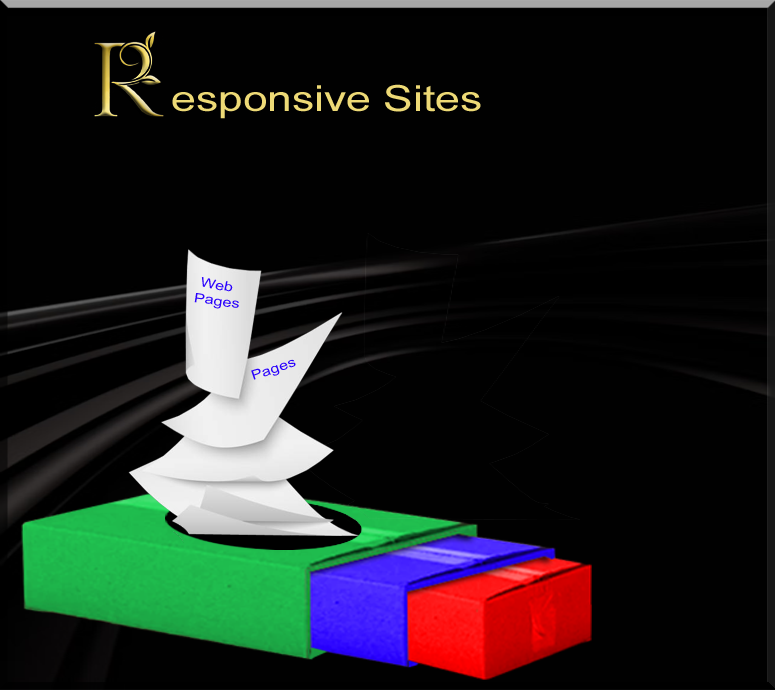
<style>
.page{position:relative;width:775px;height:690px;background:#010101}
.page>*{position:absolute;margin:0}
.t1{font:36.1px "ArialMT";color:#eeda76;scale:1.23 1}
.t2{font:13.1px "ArialMT";color:#2a02fd;scale:1.23 1}
</style>
<div class="page">
<p class="t1" style="left:172px;top:84px;width:309px;height:35px">esponsive Sites</p>
<p class="t2" style="left:201px;top:277px;width:32px;height:15px;rotate:12deg">Web</p>
<p class="t2" style="left:194px;top:293px;width:45px;height:16px;rotate:8deg">Pages</p>
<p class="t2" style="left:251px;top:359px;width:45px;height:21px;rotate:-18deg">Pages</p>
</div>
